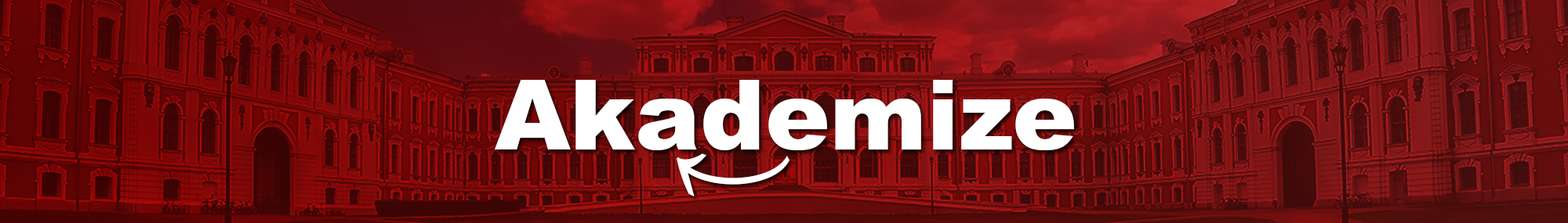
<style>
.page{position:relative;width:1568px;height:223px}
.page>*{position:absolute;margin:0}
.t1{font:97.2px "Arial-Black";color:#ffffff}
.t2{font:78.5px "Arial-Black";color:#ffffff;scale:1.48 1}
</style>
<div class="page">
<p class="t1" style="left:495px;top:80px;width:579px;height:71px">Akademize</p>
<p class="t2" style="left:677px;top:154px;width:112px;height:43px;rotate:-180deg">→</p>
</div>
